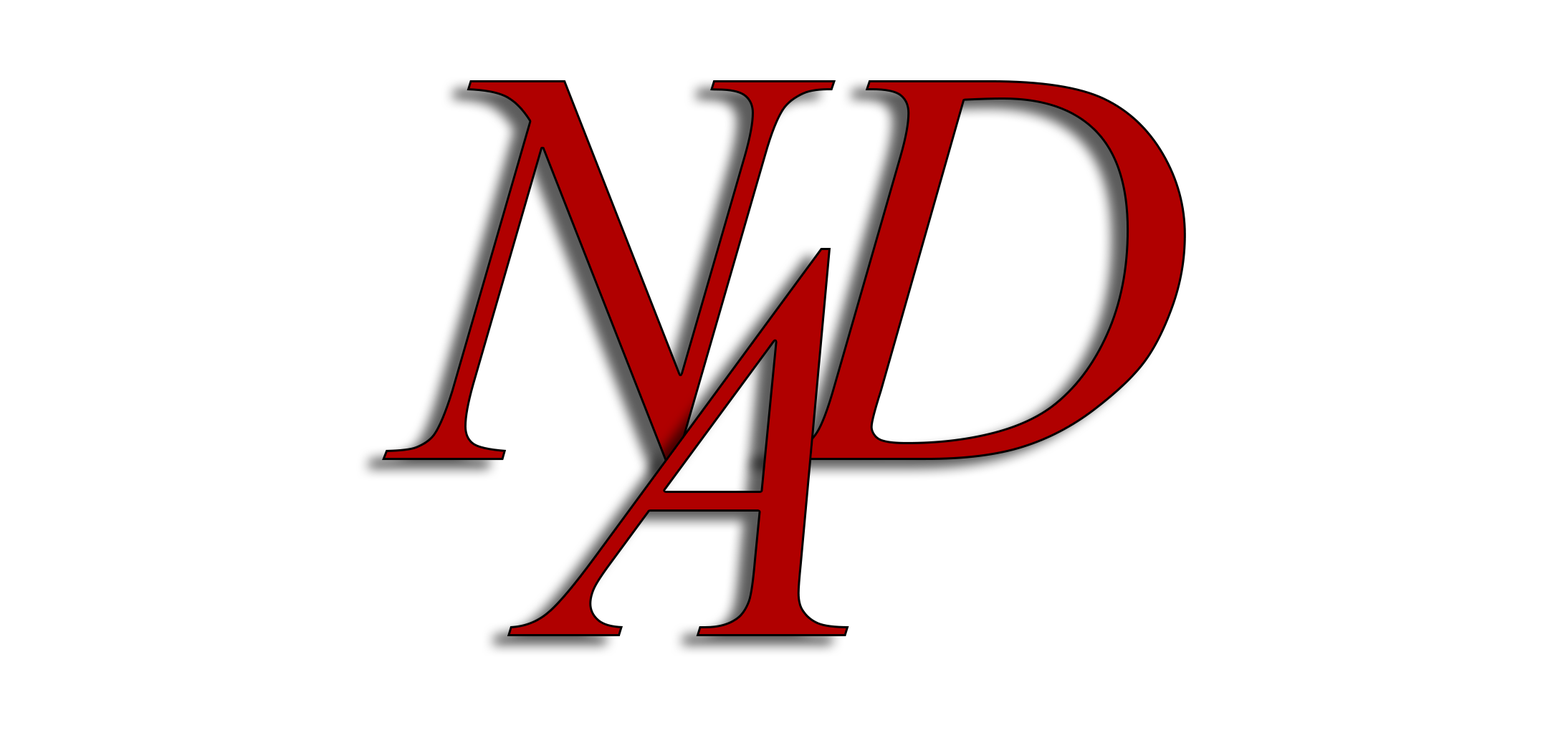
<style>
.page{position:relative;width:1568px;height:753px;background:#ffffff}
.page>*{position:absolute;margin:0}
.t1{font:573.3px "TimesNewRomanPS-ItalicMT";color:#b00000}
</style>
<div class="page">
<p class="t1" style="left:382px;top:80px;width:804px;height:389px">ND</p>
<p class="t1" style="left:507px;top:248px;width:342px;height:388px">A</p>
</div>
